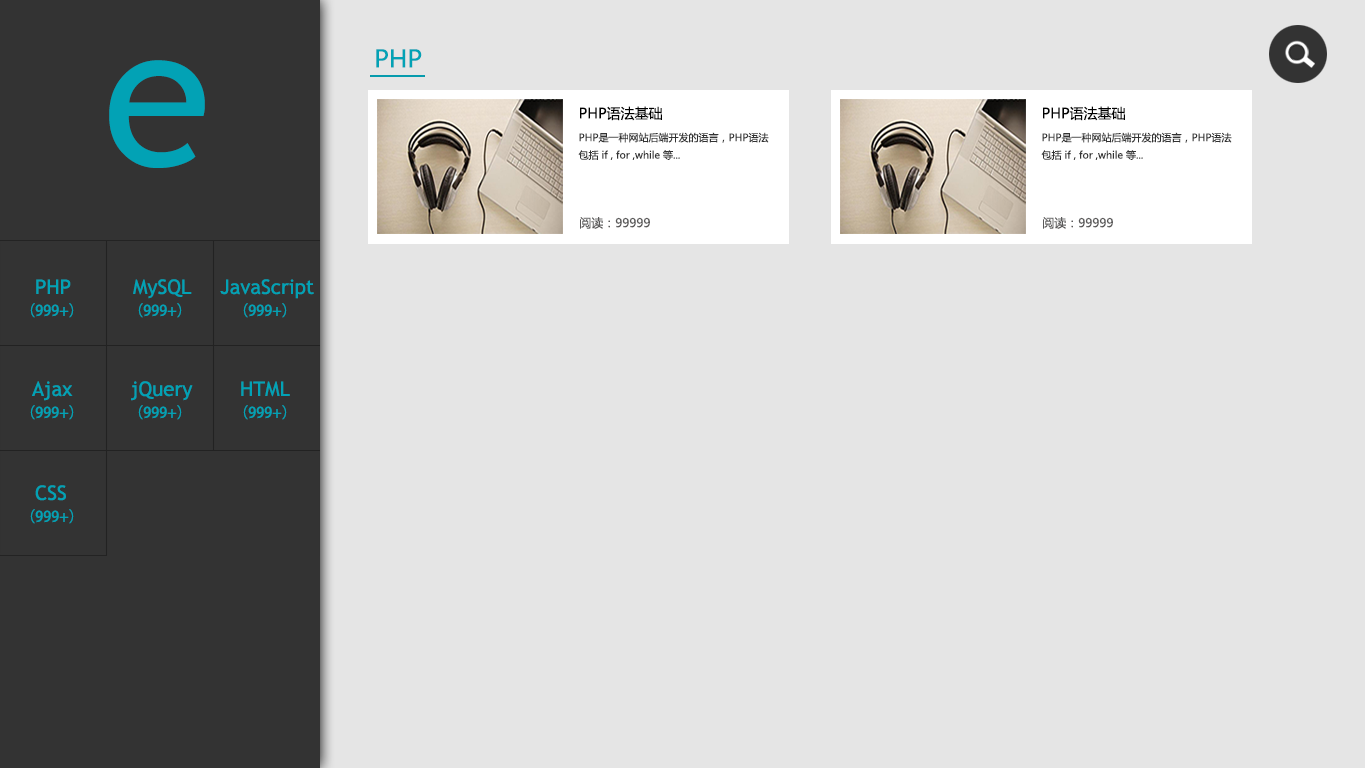
<style>
.page{position:relative;width:1366px;height:768px;background:#e5e5e5}
.page>*{position:absolute;margin:0}
.t1{font:24px "MicrosoftYaHei";color:#02a2b5}
.t2{font:198.3px "TrebuchetMS";color:#02a2b5}
.t3{font:14px "MicrosoftYaHei";color:#000000}
.t4{font:10px "MicrosoftYaHei";color:#333333}
.t5{font:12px "MicrosoftYaHei";color:#5a5959}
.t6{font:20.1px "TrebuchetMS";color:#02a2b5}
.t7{font:14.6px "AdobeHeitiStd-Regular";color:#02a2b5}
</style>
<div class="page">
<p class="t1" style="left:376px;top:49px;width:46px;height:19px">PHP</p>
<p class="t2" style="left:109px;top:60px;width:96px;height:108px">e</p>
<p class="t3" style="left:580px;top:106px;width:82px;height:15px">PHP语法基础</p>
<p class="t3" style="left:1043px;top:106px;width:82px;height:15px">PHP语法基础</p>
<p class="t4" style="left:578px;top:132px;width:191px;height:28px">PHP是一种网站后端开发的语言，PHP语法<br>包括 if , for ,while 等...</p>
<p class="t4" style="left:1041px;top:132px;width:191px;height:28px">PHP是一种网站后端开发的语言，PHP语法<br>包括 if , for ,while 等...</p>
<p class="t5" style="left:580px;top:217px;width:70px;height:12px">阅读：99999</p>
<p class="t5" style="left:1043px;top:217px;width:70px;height:12px">阅读：99999</p>
<p class="t6" style="left:36px;top:279px;width:35px;height:15px">PHP</p>
<p class="t6" style="left:133px;top:279px;width:59px;height:20px">MySQL</p>
<p class="t6" style="left:220px;top:279px;width:94px;height:20px">JavaScript</p>
<p class="t7" style="left:30px;top:303px;width:44px;height:15px">（999+）</p>
<p class="t7" style="left:138px;top:303px;width:44px;height:15px">（999+）</p>
<p class="t7" style="left:243px;top:303px;width:44px;height:15px">（999+）</p>
<p class="t6" style="left:32px;top:381px;width:41px;height:20px">Ajax</p>
<p class="t6" style="left:131px;top:381px;width:62px;height:20px">jQuery</p>
<p class="t6" style="left:241px;top:381px;width:49px;height:16px">HTML</p>
<p class="t7" style="left:30px;top:405px;width:44px;height:15px">（999+）</p>
<p class="t7" style="left:138px;top:405px;width:44px;height:15px">（999+）</p>
<p class="t7" style="left:243px;top:405px;width:44px;height:15px">（999+）</p>
<p class="t6" style="left:35px;top:485px;width:31px;height:16px">CSS</p>
<p class="t7" style="left:30px;top:509px;width:44px;height:15px">（999+）</p>
</div>
